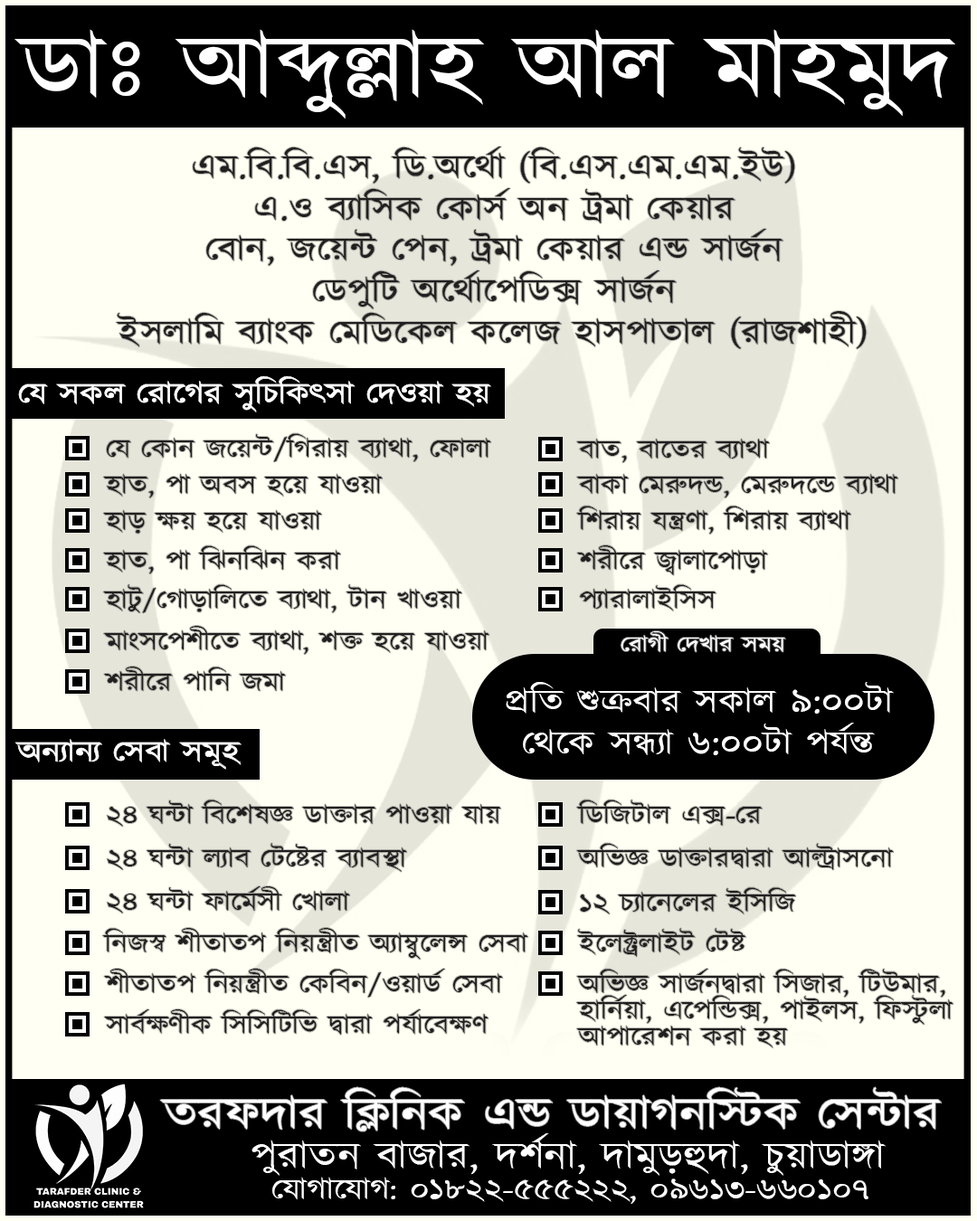
<style>
.page{position:relative;width:977px;height:1221px;background:#fffff3}
.page>*{position:absolute;margin:0}
.t1{font:90.4px "Kalpurush";color:#ffffff;scale:1.16 1}
.t2{font:33.9px/41.4px "Kalpurush";color:#231f20;scale:1.16 1}
.t3{font:30.1px "Kalpurush";color:#ffffff;scale:1.16 1}
.t4{font:26.4px "Kalpurush";color:#231f20;scale:1.16 1}
.t5{font:22.6px "Kalpurush";color:#ffffff;scale:1.16 1}
.t6{font:33.9px/41.4px "Kalpurush";color:#ffffff;scale:1.16 1}
.t7{font:26.4px/26.4px "Kalpurush";color:#231f20;scale:1.16 1}
.t8{font:45.2px "Kalpurush";color:#ffffff;scale:1.16 1}
.t9{font:37.7px "Kalpurush";color:#ffffff;scale:1.16 1}
</style>
<div class="page">
<p class="t1" style="left:14px;top:29px;width:941px;height:90px">ডাঃ আব্দুল্লাহ আল মাহমুদ</p>
<p class="t2" style="left:116px;top:147px;width:750px;height:202px;text-align:center">এম.বি.বি.এস, ডি.অর্থো (বি.এস.এম.এম.ইউ)<br>এ.ও ব্যাসিক কোর্স অন ট্রমা কেয়ার<br>বোন, জয়েন্ট পেন, ট্রমা কেয়ার এন্ড সার্জন<br>ডেপুটি অর্থোপেডিক্স সার্জন<br>ইসলামি ব্যাংক মেডিকেল কলেজ হাসপাতাল (রাজশাহী)</p>
<p class="t3" style="left:18px;top:375px;width:473px;height:38px">যে সকল রোগের সুচিকিৎসা দেওয়া হয়</p>
<p class="t4" style="left:106px;top:433px;width:385px;height:29px">যে কোন জয়েন্ট/গিরায় ব্যাথা, ফোলা</p>
<p class="t4" style="left:576px;top:439px;width:194px;height:24px">বাত, বাতের ব্যাথা</p>
<p class="t4" style="left:103px;top:474px;width:280px;height:24px">হাত, পা অবস হয়ে যাওয়া</p>
<p class="t4" style="left:576px;top:474px;width:322px;height:24px">বাকা মেরুদন্ড, মেরুদন্ডে ব্যাথা</p>
<p class="t4" style="left:576px;top:506px;width:275px;height:28px">শিরায় যন্ত্রণা, শিরায় ব্যাথা</p>
<p class="t4" style="left:103px;top:510px;width:219px;height:24px">হাড় ক্ষয় হয়ে যাওয়া</p>
<p class="t4" style="left:103px;top:545px;width:238px;height:29px">হাত, পা ঝিনঝিন করা</p>
<p class="t4" style="left:577px;top:545px;width:191px;height:30px">শরীরে জ্বালাপোড়া</p>
<p class="t4" style="left:103px;top:584px;width:359px;height:29px">হাটু/গোড়ালিতে ব্যাথা, টান খাওয়া</p>
<p class="t4" style="left:580px;top:584px;width:136px;height:27px">প্যারালাইসিস</p>
<p class="t4" style="left:103px;top:626px;width:386px;height:29px">মাংসপেশীতে ব্যাথা, শক্ত হয়ে যাওয়া</p>
<p class="t5" style="left:620px;top:631px;width:166px;height:21px">রোগী দেখার সময়</p>
<p class="t4" style="left:104px;top:667px;width:182px;height:24px">শরীরে পানি জমা</p>
<p class="t6" style="left:506px;top:682px;width:388px;height:73px;text-align:center">প্রতি শুক্রবার সকাল ৯:০০টা<br>থেকে সন্ধ্যা ৬:০০টা পর্যন্ত</p>
<p class="t3" style="left:15px;top:739px;width:226px;height:31px">অন্যান্য সেবা সমূহ</p>
<p class="t4" style="left:107px;top:799px;width:394px;height:28px">২৪ ঘন্টা বিশেষজ্ঞ ডাক্তার পাওয়া যায়</p>
<p class="t4" style="left:576px;top:799px;width:186px;height:27px">ডিজিটাল এক্স-রে</p>
<p class="t4" style="left:107px;top:843px;width:300px;height:29px">২৪ ঘন্টা ল্যাব টেষ্টের ব্যাবস্থা</p>
<p class="t4" style="left:576px;top:843px;width:318px;height:27px">অভিজ্ঞ ডাক্তারদ্বারা আল্ট্রাসনো</p>
<p class="t4" style="left:107px;top:886px;width:243px;height:27px">২৪ ঘন্টা ফার্মেসী খোলা</p>
<p class="t4" style="left:580px;top:887px;width:216px;height:27px">১২ চ্যানেলের ইসিজি</p>
<p class="t4" style="left:102px;top:928px;width:426px;height:32px">নিজস্ব শীতাতপ নিয়ন্ত্রীত অ্যাম্বুলেন্স সেবা</p>
<p class="t4" style="left:577px;top:928px;width:169px;height:29px">ইলেক্ট্রলাইট টেষ্ট</p>
<p class="t4" style="left:104px;top:969px;width:399px;height:29px">শীতাতপ নিয়ন্ত্রীত কেবিন/ওয়ার্ড সেবা</p>
<p class="t7" style="left:576px;top:969px;width:377px;height:79px">অভিজ্ঞ সার্জনদ্বারা সিজার, টিউমার,<br>হার্নিয়া, এপেন্ডিক্স, পাইলস, ফিস্টুলা <br>আপারেশন করা হয়</p>
<p class="t4" style="left:104px;top:1009px;width:384px;height:26px">সার্বক্ষণীক সিসিটিভি দ্বারা পর্যাবেক্ষণ</p>
<p class="t8" style="left:160px;top:1087px;width:781px;height:44px">তরফদার ক্লিনিক এন্ড ডায়াগনস্টিক সেন্টার</p>
<p class="t9" style="left:251px;top:1133px;width:634px;height:43px">পুরাতন বাজার, দর্শনা, দামুড়হুদা, চুয়াডাঙ্গা</p>
<p class="t3" style="left:272px;top:1177px;width:596px;height:27px">যোগাযোগ: ০১৮২২-৫৫৫২২২, ০৯৬১৩-৬৬০১০৭</p>
</div>
